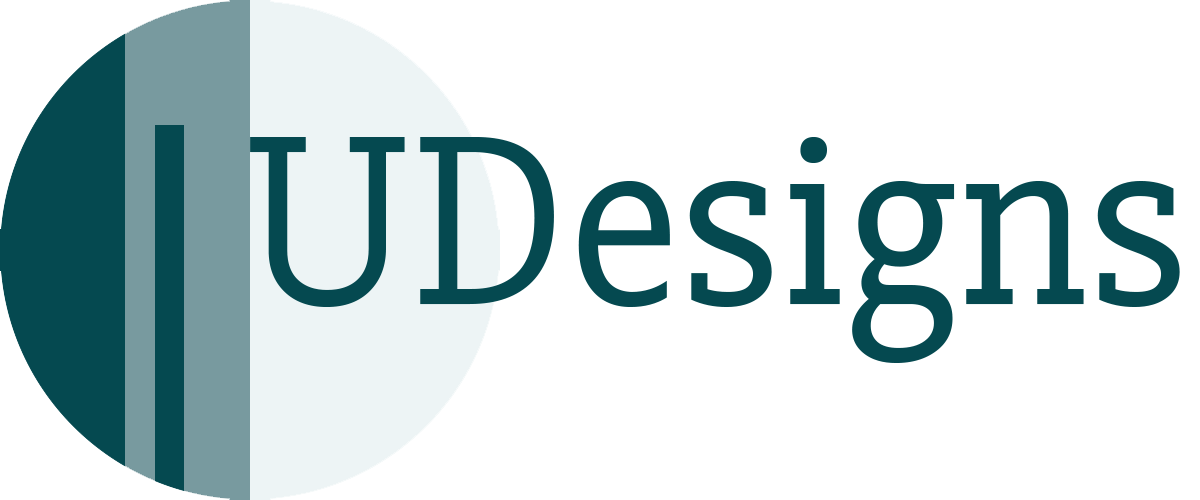
<style>
.page{position:relative;width:1200px;height:500px;background:#ffffff}
.page>*{position:absolute;margin:0}
.t1{font:250px "Slabo27px-Regular";color:#054950}
</style>
<div class="page">
<p class="t1" style="left:250px;top:137px;width:930px;height:226px">UDesigns</p>
</div>
